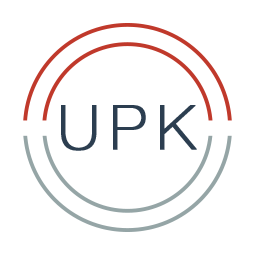
<style>
.page{position:relative;width:256px;height:256px;background:#ffffff}
.page>*{position:absolute;margin:0}
.t1{font:61.4px "HelveticaNeueLTPro-Th";letter-spacing:0.15em;color:#2c3e50;text-transform:uppercase;font-weight:bold}
</style>
<div class="page">
<p class="t1" style="left:61px;top:105px;width:136px;height:46px">UPK</p>
</div>
